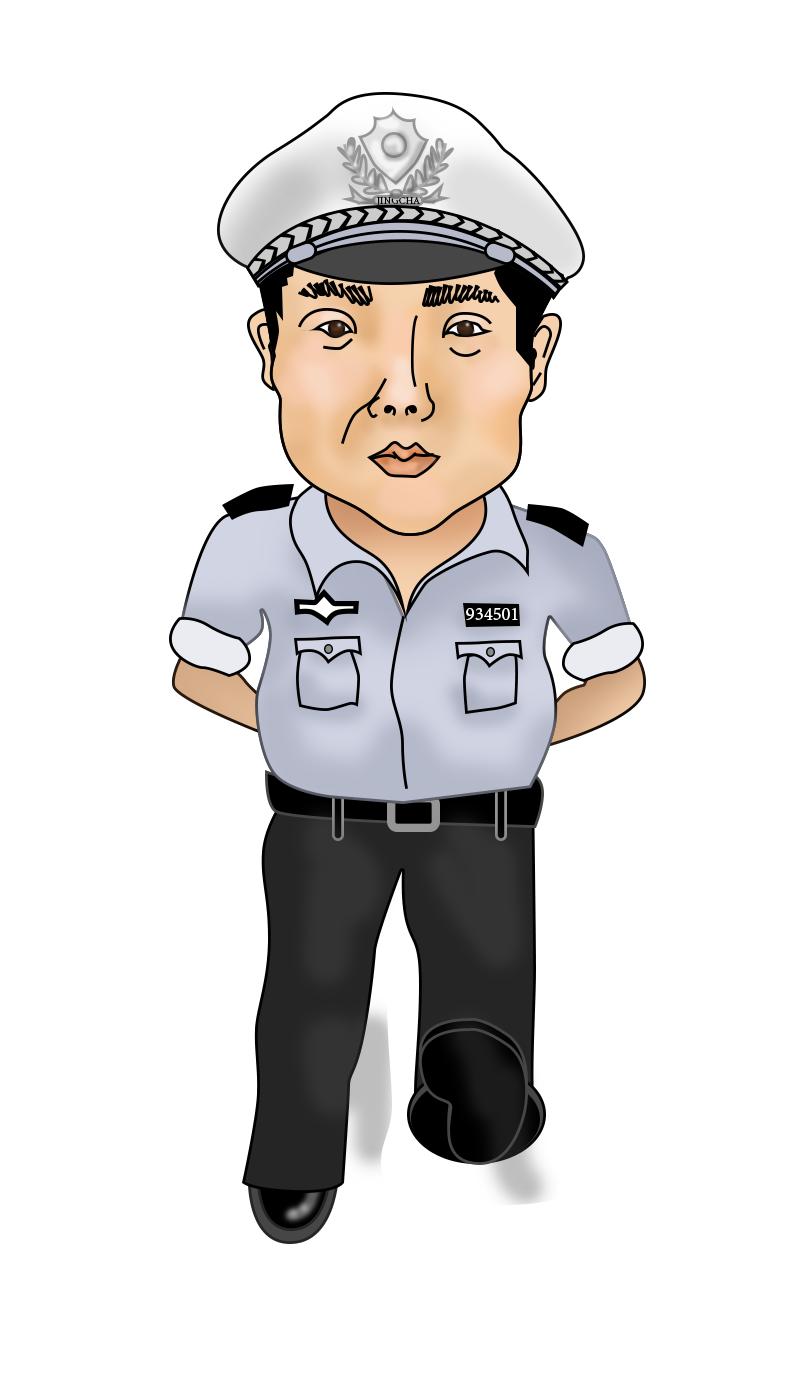
<style>
.page{position:relative;width:790px;height:1373px;background:#ffffff}
.page>*{position:absolute;margin:0}
.t1{font:10.1px "MinionPro-Regular";color:#000000}
.t2{font:18.6px "MinionPro-Regular";color:#fffdfd}
</style>
<div class="page">
<p class="t1" style="left:377px;top:197px;width:43px;height:9px">JINGCHA</p>
<p class="t2" style="left:466px;top:608px;width:52px;height:12px">934501</p>
</div>
